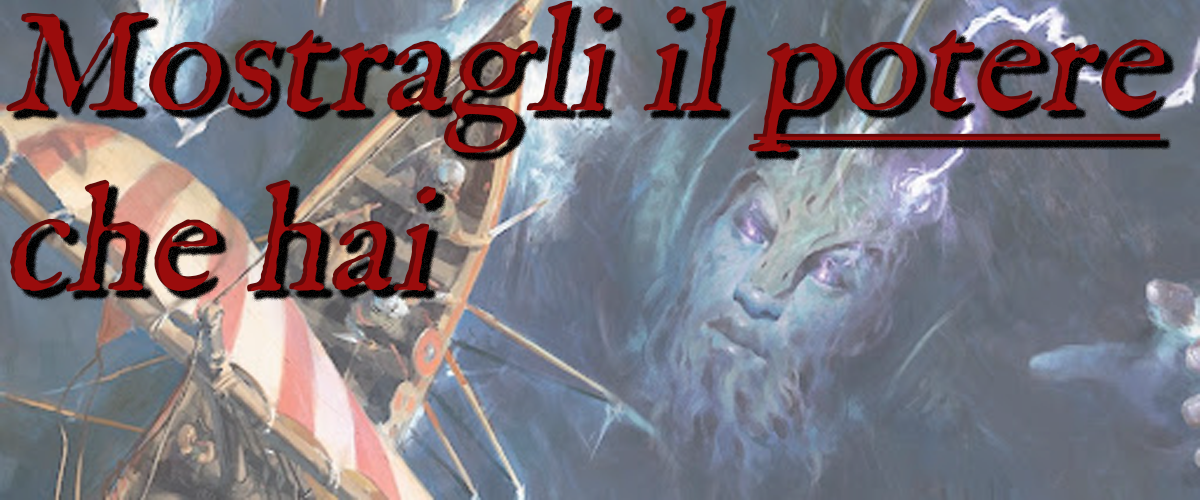
<style>
.page{position:relative;width:1200px;height:500px}
.page>*{position:absolute;margin:0}
.t1{font:150px "IM_FELL_English_Roman";color:#9a0c0c;font-style:italic}
.t2{font:150px "IM_FELL_English_Roman";color:#9a0c0c;font-style:italic;text-decoration:underline}
</style>
<div class="page">
<p class="t1" style="left:6px;top:0px;width:1159px;height:292px">Mostragli il <span class="t2">potere<br></span>che hai</p>
</div>
